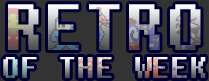
<style>
.page{position:relative;width:209px;height:81px;background:#333333}
.page>*{position:absolute;margin:0}
.t1{font:65px "Fixedsys"}
.t2{font:30px "Fixedsys"}
</style>
<div class="page">
<p class="t1" style="left:8px;top:4px;width:193px;height:46px">RETRO</p>
<p class="t2" style="left:3px;top:57px;width:203px;height:21px">OF THE WEEK</p>
</div>
